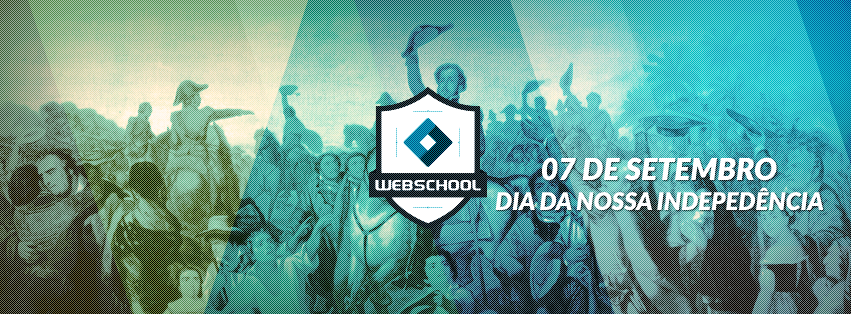
<style>
.page{position:relative;width:851px;height:314px}
.page>*{position:absolute;margin:0}
.t1{font:30px "Lato-BlackItalic";color:#ffffff;text-transform:uppercase}
.t2{font:24px "Lato-BlackItalic";color:#ffffff;text-transform:uppercase}
</style>
<div class="page">
<p class="t1" style="left:542px;top:157px;width:235px;height:24px">07 de Setembro</p>
<p class="t2" style="left:495px;top:187px;width:329px;height:24px">Dia da nossa indepedência</p>
</div>
